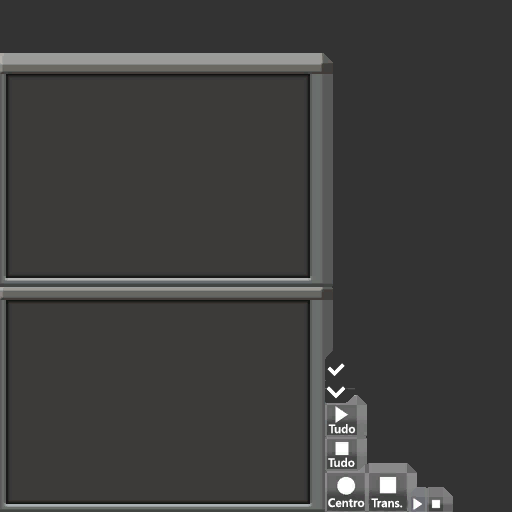
<style>
.page{position:relative;width:512px;height:512px;background:#3c3b39}
.page>*{position:absolute;margin:0}
.t1{font:12px "YuGothicUI-Semibold";color:#ffffff}
</style>
<div class="page">
<p class="t1" style="left:328px;top:424px;width:28px;height:10px">Tudo</p>
<p class="t1" style="left:328px;top:457px;width:27px;height:10px">Tudo</p>
<p class="t1" style="left:328px;top:498px;width:37px;height:10px">Centro</p>
<p class="t1" style="left:371px;top:498px;width:32px;height:10px">Trans.</p>
</div>
